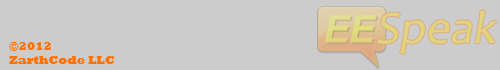
<style>
.page{position:relative;width:500px;height:70px;background:#cccccc}
.page>*{position:absolute;margin:0}
.t1{font:12px "Rockwell-ExtraBold";color:#ff7200}
</style>
<div class="page">
<p class="t1" style="left:9px;top:42px;width:106px;height:22px">©2012<br>ZarthCode LLC</p>
</div>
